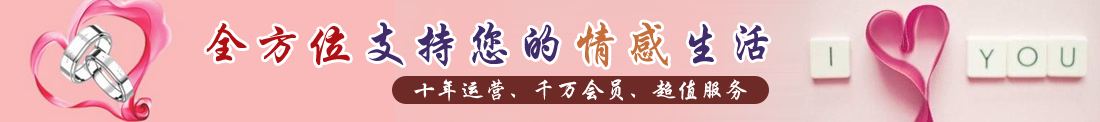
<style>
.page{position:relative;width:1100px;height:122px;background:#fababa}
.page>*{position:absolute;margin:0}
.t1{font:48px "STXingkai";letter-spacing:0.1em;color:#402c6b}
.t2{font:48px "STXingkai";letter-spacing:0.1em;color:#b01013}
.t3{font:48px "STXingkai";letter-spacing:0.1em;color:#c66e3c}
.t4{font:24px "STXingkai";color:#ffffff}
</style>
<div class="page">
<p class="t1" style="left:206px;top:22px;width:563px;height:45px"><span class="t2">全方位</span>支持您的<span class="t3">情感</span>生活</p>
<p class="t4" style="left:414px;top:79px;width:333px;height:23px">十年运营、千万会员、超值服务</p>
</div>
